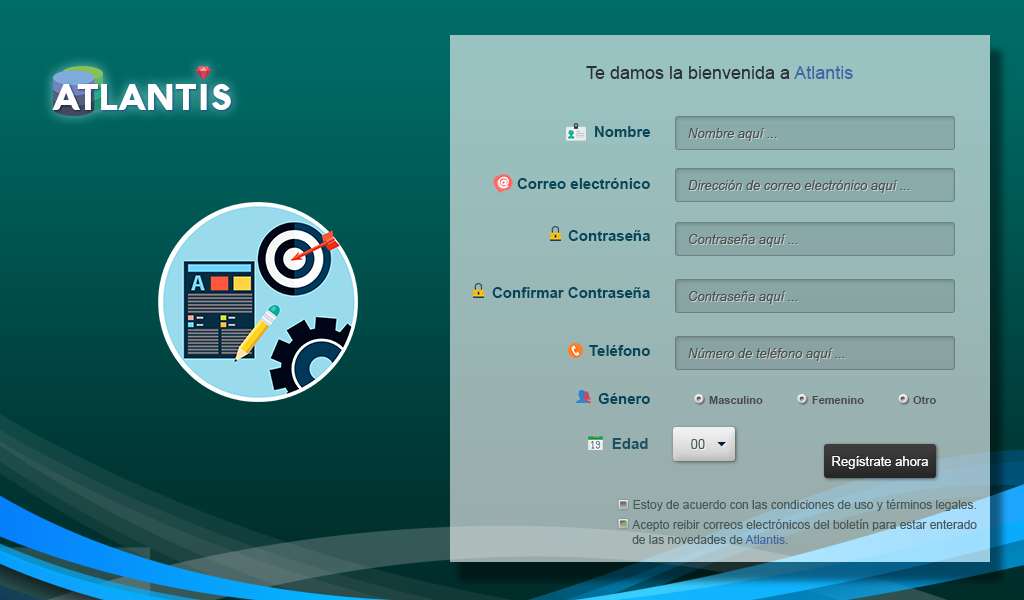
<style>
.page{position:relative;width:1024px;height:600px}
.page>*{position:absolute;margin:0}
.t1{font:18px "ArialMT";color:#292f33}
.t2{font:18px "ArialMT";color:#4263a6}
.t3{font:15px "Arial-BoldMT";color:#05475a}
.t4{font:13px "Arial-ItalicMT";color:#4c4c4c}
.t5{font:11px "Arial-BoldMT";color:#4c4c4c}
.t6{font:15px "Arial-BoldMT";color:#195262}
.t7{font:13px "ArialMT";color:#47585a}
.t8{font:13px "ArialMT";color:#ffffff}
.t9{font:12px "ArialMT";color:#475859}
.t10{font:12px "ArialMT";color:#4263a6}
</style>
<div class="page">
<p class="t1" style="left:586px;top:66px;width:267px;height:13px">Te damos la bienvenida a <span class="t2">Atlantis</span></p>
<p class="t3" style="left:595px;top:126px;width:56px;height:11px">Nombre</p>
<p class="t4" style="left:688px;top:128px;width:89px;height:13px">Nombre aquí ...</p>
<p class="t3" style="left:517px;top:178px;width:133px;height:11px">Correo electrónico</p>
<p class="t4" style="left:688px;top:180px;width:222px;height:13px">Dirección de correo electrónico aquí ...</p>
<p class="t3" style="left:568px;top:230px;width:82px;height:11px">Contraseña</p>
<p class="t4" style="left:689px;top:234px;width:109px;height:13px">Contraseña aquí ...</p>
<p class="t3" style="left:492px;top:287px;width:158px;height:11px">Confirmar Contraseña</p>
<p class="t4" style="left:689px;top:291px;width:109px;height:13px">Contraseña aquí ...</p>
<p class="t3" style="left:589px;top:345px;width:61px;height:11px">Teléfono</p>
<p class="t4" style="left:688px;top:348px;width:157px;height:13px">Número de teléfono aquí ...</p>
<p class="t3" style="left:598px;top:393px;width:52px;height:11px">Género</p>
<p class="t5" style="left:709px;top:396px;width:54px;height:8px">Masculino</p>
<p class="t5" style="left:812px;top:396px;width:52px;height:8px">Femenino</p>
<p class="t5" style="left:913px;top:396px;width:23px;height:8px">Otro</p>
<p class="t6" style="left:612px;top:438px;width:36px;height:11px">Edad</p>
<p class="t7" style="left:691px;top:439px;width:14px;height:10px">00</p>
<p class="t8" style="left:832px;top:456px;width:96px;height:13px">Regístrate ahora</p>
<p class="t9" style="left:633px;top:499px;width:343px;height:12px">Estoy de acuerdo con las condiciones de uso y términos legales.</p>
<p class="t9" style="left:632px;top:519px;width:345px;height:25px">Acepto reibir correos electrónicos del boletín para estar enterado de las novedades de <span class="t10">Atlantis</span>.</p>
</div>
